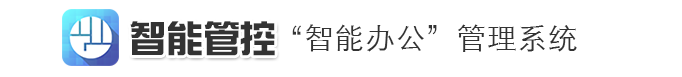
<style>
.page{position:relative;width:682px;height:77px;background:#ffffff}
.page>*{position:absolute;margin:0}
.t1{font:35.6px "SingyiEG-Ultra-GB";letter-spacing:0.03em;color:#333333}
.t2{font:29.6px "STXihei";letter-spacing:0.03em;color:#333333}
</style>
<div class="page">
<p class="t1" style="left:130px;top:21px;width:145px;height:35px">智能管控</p>
<p class="t2" style="left:292px;top:24px;width:285px;height:28px">“智能办公”管理系统</p>
</div>
